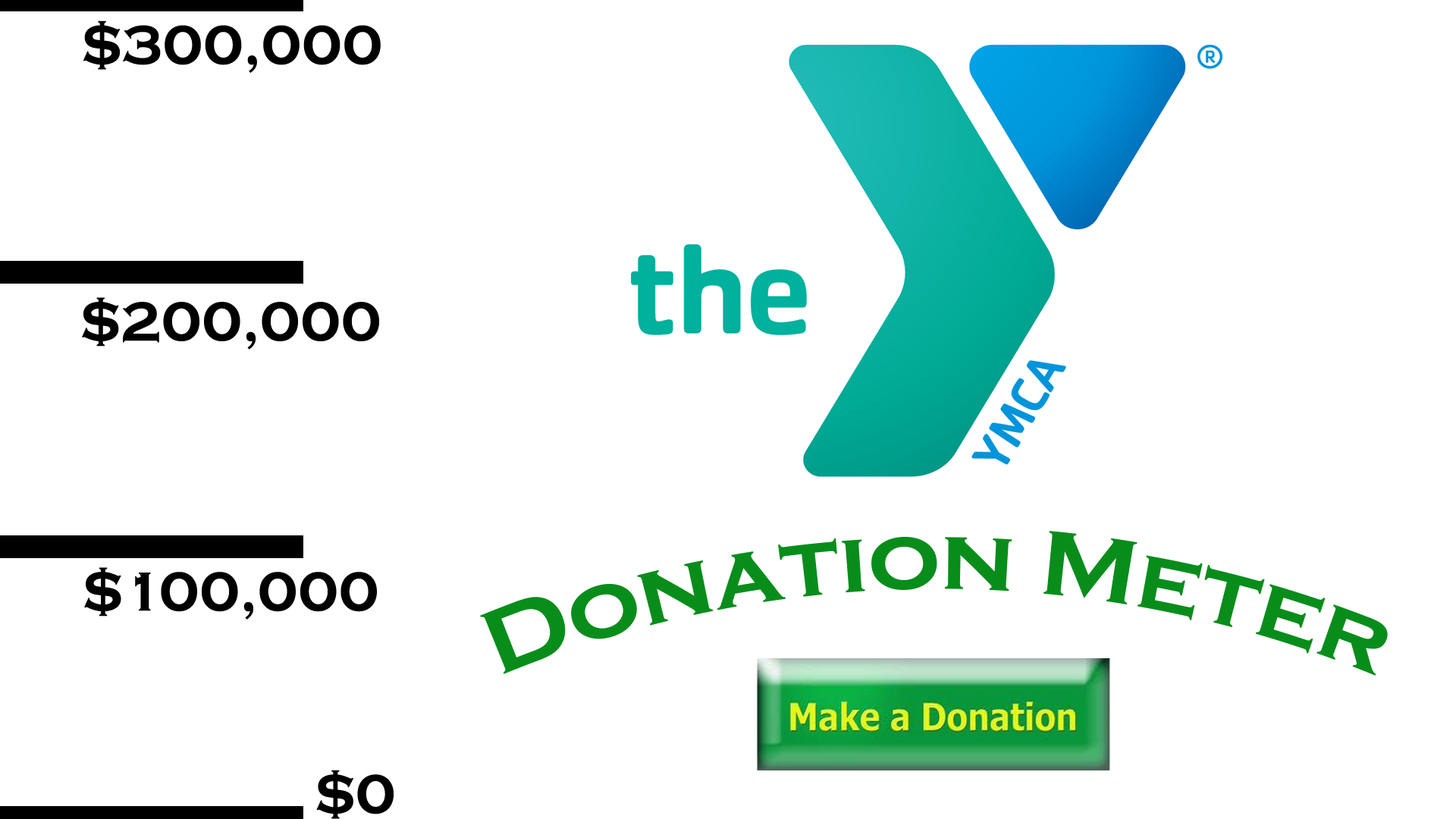
<style>
.page{position:relative;width:1456px;height:819px;background:#ffffff}
.page>*{position:absolute;margin:0}
.t1{font:56.9px "CopperplateGothic-Bold";color:#000000}
.t2{font:94.8px "CopperplateGothic-Bold";color:#088d1b}
</style>
<div class="page">
<p class="t1" style="left:83px;top:20px;width:298px;height:53px">$300,000</p>
<p class="t1" style="left:82px;top:297px;width:297px;height:53px">$200,000</p>
<p class="t2" style="left:480px;top:531px;width:908px;height:145px">Donation Meter</p>
<p class="t1" style="left:84px;top:567px;width:293px;height:53px">$100,000</p>
<p class="t1" style="left:316px;top:770px;width:78px;height:49px">$0</p>
</div>
